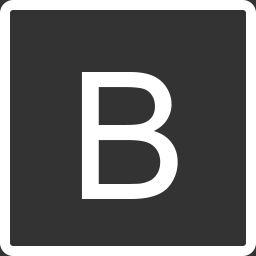
<style>
.page{position:relative;width:256px;height:256px;background:#333333}
.page>*{position:absolute;margin:0}
.t1{font:176.7px "ArialMT";color:#ffffff}
</style>
<div class="page">
<p class="t1" style="left:81px;top:72px;width:97px;height:127px">B</p>
</div>
